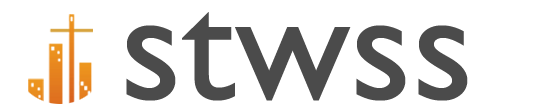
<style>
.page{position:relative;width:550px;height:111px;background:#ffffff}
.page>*{position:absolute;margin:0}
.t1{font:160px "GillSans";color:#4b4b4b}
</style>
<div class="page">
<p class="t1" style="left:126px;top:12px;width:342px;height:89px">stwss</p>
</div>
